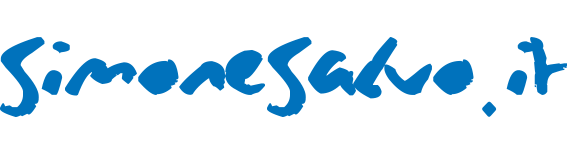
<style>
.page{position:relative;width:567px;height:142px;background:#ffffff}
.page>*{position:absolute;margin:0}
.t1{font:114px "ZingEasy";color:#0072bc}
</style>
<div class="page">
<p class="t1" style="left:0px;top:37px;width:568px;height:80px">SimoneSalvo.it</p>
</div>
